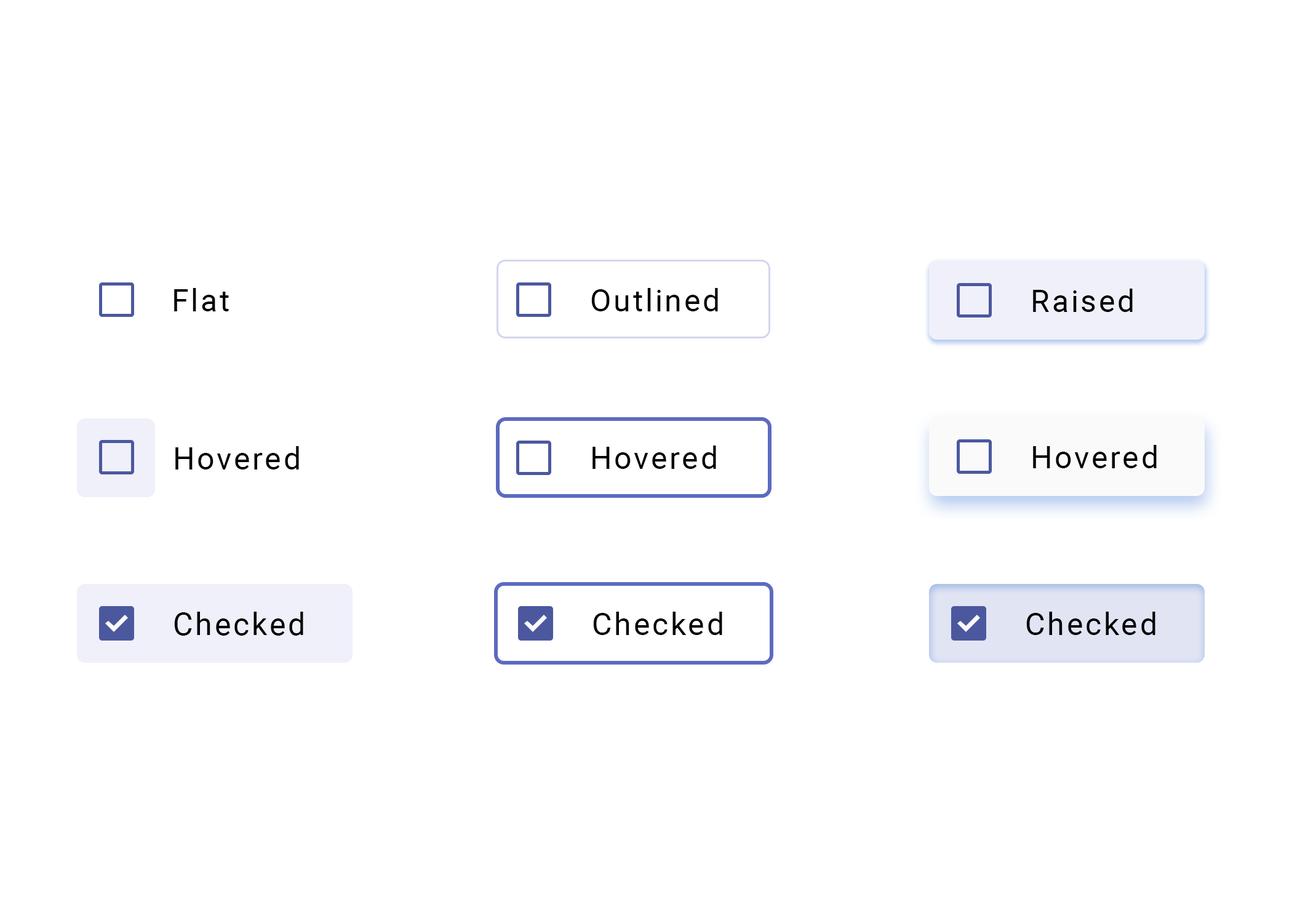
<style>
.page{position:relative;width:1292px;height:923px;background:#ffffff}
.page>*{position:absolute;margin:0}
.t1{font:30.8px "Roboto-Regular";letter-spacing:0.075em;color:#000000}
.t2{font:31.1px "Roboto-Regular";letter-spacing:0.075em;color:#000000}
</style>
<div class="page">
<p class="t1" style="left:174px;top:288px;width:55px;height:23px">Flat</p>
<p class="t1" style="left:591px;top:288px;width:127px;height:23px">Outlined</p>
<p class="t1" style="left:1033px;top:289px;width:100px;height:23px">Raised</p>
<p class="t1" style="left:175px;top:446px;width:124px;height:23px">Hovered</p>
<p class="t1" style="left:592px;top:445px;width:124px;height:24px">Hovered</p>
<p class="t1" style="left:1033px;top:445px;width:124px;height:23px">Hovered</p>
<p class="t2" style="left:174px;top:612px;width:129px;height:24px">Checked</p>
<p class="t1" style="left:593px;top:612px;width:129px;height:23px">Checked</p>
<p class="t1" style="left:1026px;top:612px;width:129px;height:23px">Checked</p>
</div>
